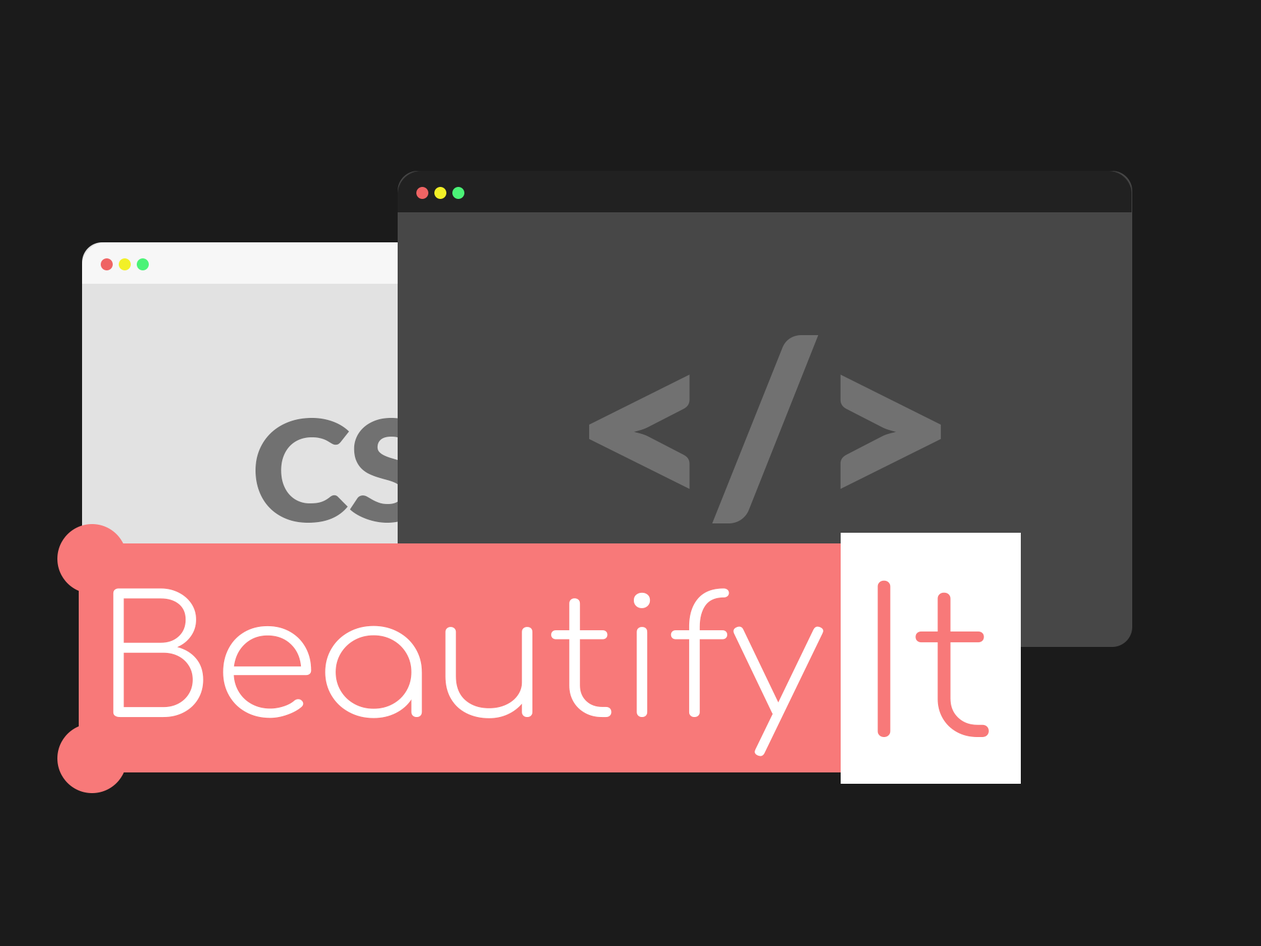
<style>
.page{position:relative;width:1261px;height:946px;background:#1b1b1b}
.page>*{position:absolute;margin:0}
.t1{font:235.9px "Lato-Black";letter-spacing:-0.005em;color:#717171;scale:1.05 1}
.t2{font:141px "Lato-Black";letter-spacing:-0.005em;scale:1.05 1}
.t3{font:200.2px "Comfortaa-Light";color:#f87979;scale:1.05 1}
.t4{font:164.5px "Comfortaa-Light";color:#ffffff;scale:1.05 1}
</style>
<div class="page">
<p class="t1" style="left:589px;top:335px;width:353px;height:188px">&lt;/&gt;</p>
<p class="t2" style="left:256px;top:418px;width:249px;height:104px">CSS</p>
<p class="t3" style="left:877px;top:580px;width:112px;height:157px">It</p>
<p class="t4" style="left:113px;top:588px;width:710px;height:168px">Beautify</p>
</div>
